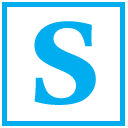
<style>
.page{position:relative;width:128px;height:128px;background:#ffffff}
.page>*{position:absolute;margin:0}
.t1{font:115.7px "CalisMTBol";color:#00aeef;scale:1.12 1}
</style>
<div class="page">
<p class="t1" style="left:34px;top:21px;width:62px;height:84px">S</p>
</div>
